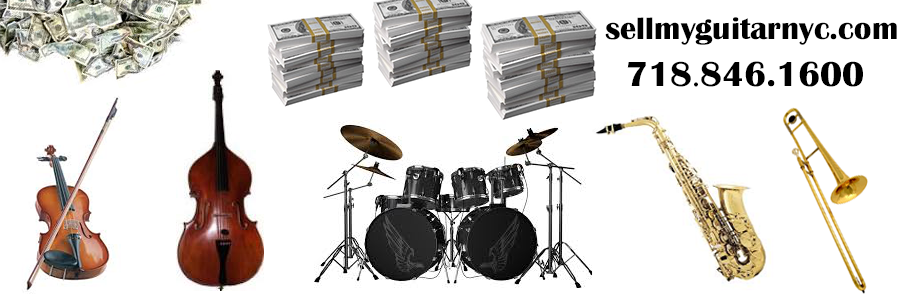
<style>
.page{position:relative;width:900px;height:300px;background:#ffffff}
.page>*{position:absolute;margin:0}
.t1{font:31.9px "BritannicBold";color:#000000}
.t2{font:36px "BritannicBold";color:#000000}
.t3{font:36px "MinionPro-Regular";color:#000000}
</style>
<div class="page">
<p class="t1" style="left:605px;top:17px;width:292px;height:28px">sellmyguitarnyc.com</p>
<p class="t2" style="left:627px;top:61px;width:236px;height:26px">718<span class="t3">.</span>846.1600</p>
</div>
